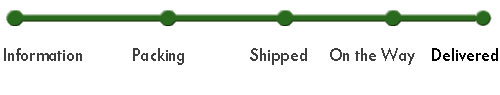
<style>
.page{position:relative;width:500px;height:95px;background:#ffffff}
.page>*{position:absolute;margin:0}
.t1{font:20px "TwCenMT-Regular";color:#3e3e3e;scale:0.89 1}
.t2{font:20px "TwCenMT-Regular";color:#000000;scale:0.89 1}
</style>
<div class="page">
<p class="t1" style="left:4px;top:48px;width:494px;height:17px">Information          Packing             Shipped    On the Way   <span class="t2">Delivered</span></p>
</div>
